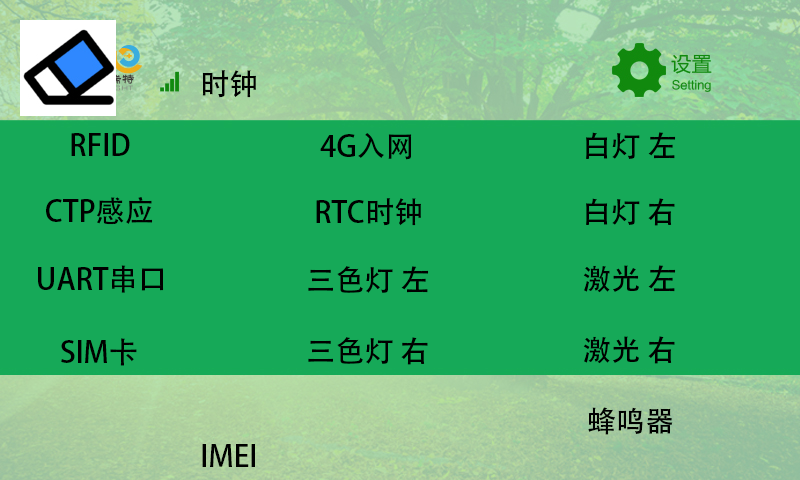
<style>
.page{position:relative;width:800px;height:480px;background:#16a958}
.page>*{position:absolute;margin:0}
.t1{font:29.2px "AdobeHeitiStd-Regular";color:#000000}
</style>
<div class="page">
<p class="t1" style="left:202px;top:70px;width:54px;height:28px">时钟</p>
<p class="t1" style="left:71px;top:133px;width:59px;height:23px">RFID</p>
<p class="t1" style="left:320px;top:133px;width:92px;height:27px">4G入网</p>
<p class="t1" style="left:586px;top:132px;width:90px;height:27px">白灯 左</p>
<p class="t1" style="left:46px;top:197px;width:107px;height:28px">CTP感应</p>
<p class="t1" style="left:316px;top:198px;width:105px;height:28px">RTC时钟</p>
<p class="t1" style="left:586px;top:198px;width:89px;height:28px">白灯 右</p>
<p class="t1" style="left:38px;top:265px;width:126px;height:28px">UART串口</p>
<p class="t1" style="left:308px;top:266px;width:121px;height:27px">三色灯 左</p>
<p class="t1" style="left:583px;top:265px;width:93px;height:28px">激光 左</p>
<p class="t1" style="left:61px;top:338px;width:76px;height:28px">SIM卡</p>
<p class="t1" style="left:308px;top:337px;width:120px;height:28px">三色灯 右</p>
<p class="t1" style="left:583px;top:336px;width:92px;height:28px">激光 右</p>
<p class="t1" style="left:588px;top:407px;width:85px;height:28px">蜂鸣器</p>
<p class="t1" style="left:202px;top:444px;width:53px;height:23px">IMEI</p>
</div>
